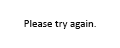
<style>
.page{position:relative;width:120px;height:48px;background:#ffffff}
.page>*{position:absolute;margin:0}
.t1{font:11px "Calibri";color:#080808}
</style>
<div class="page">
<p class="t1" style="left:24px;top:20px;width:72px;height:9px">Please try again.</p>
</div>
